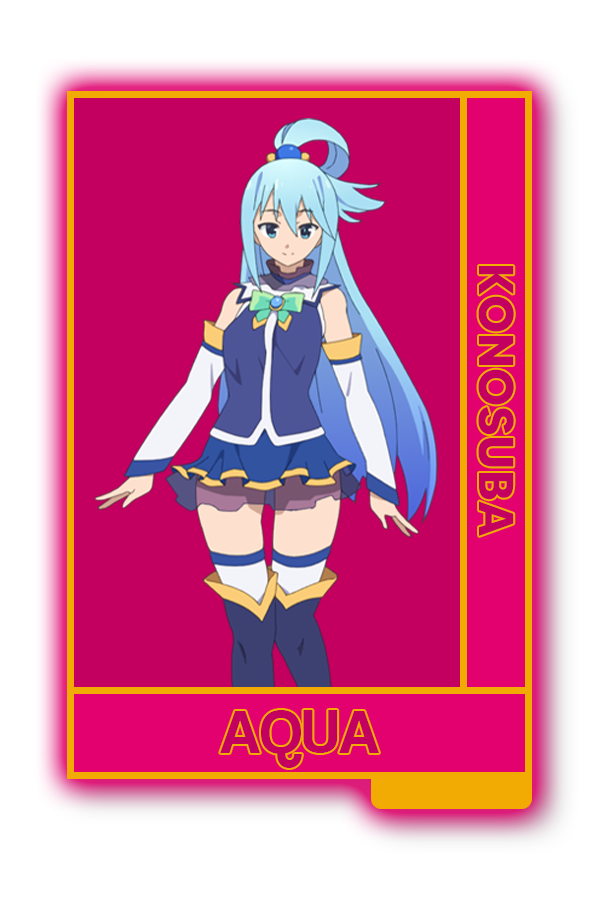
<style>
.page{position:relative;width:600px;height:900px;background:#c3005f}
.page>*{position:absolute;margin:0}
.t1{font:48.8px "MADETOMMY-Bold";color:#c3005f}
.t2{font:62.7px "CoolveticaRg-Regular";color:#c3005f}
</style>
<div class="page">
<p class="t1" style="left:478px;top:266px;width:36px;height:270px;rotate:90deg">KONOSUBA</p>
<p class="t2" style="left:220px;top:710px;width:159px;height:58px">AQUA</p>
</div>
